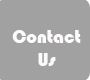
<style>
.page{position:relative;width:90px;height:80px;background:#a1a1a1}
.page>*{position:absolute;margin:0}
.t1{font:18.7px "Bauhaus93";color:#fdfafa}
</style>
<div class="page">
<p class="t1" style="left:12px;top:30px;width:69px;height:36px;text-align:center">Contact Us</p>
</div>
